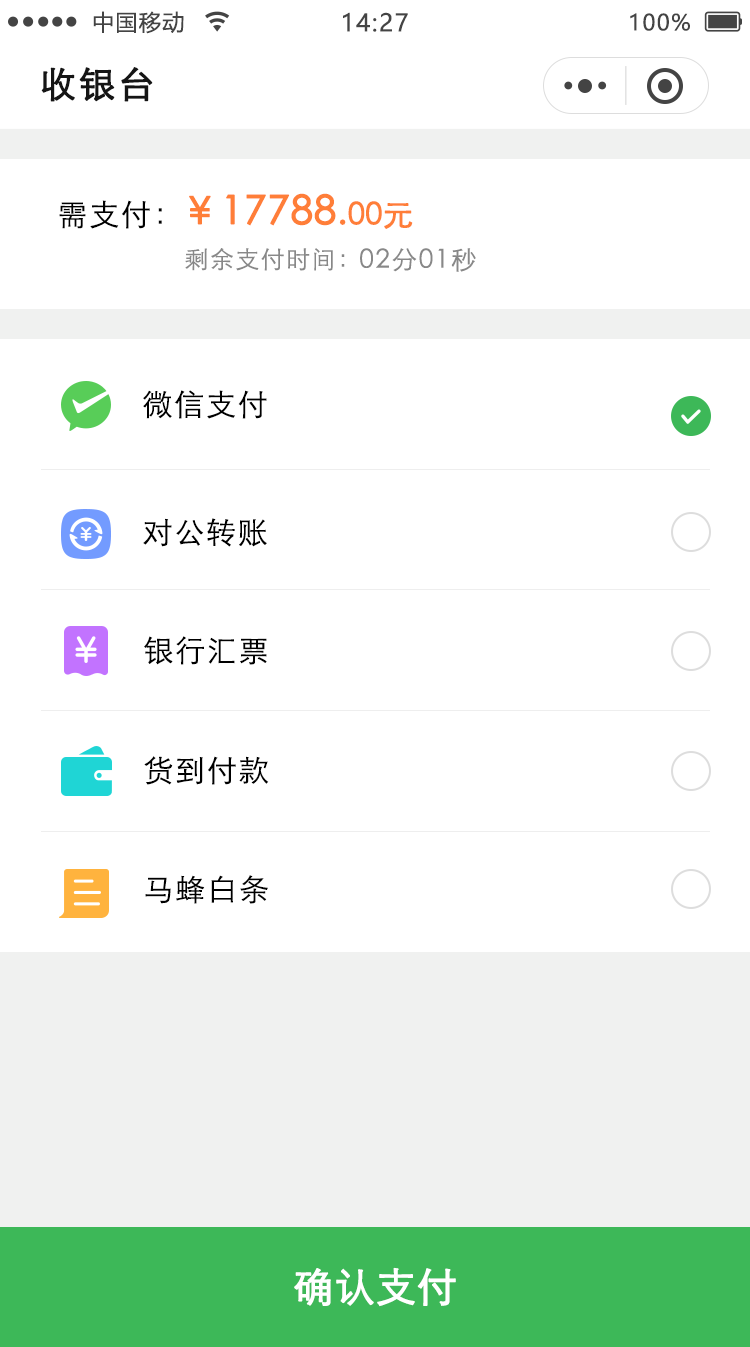
<style>
.page{position:relative;width:750px;height:1347px;background:#ffffff}
.page>*{position:absolute;margin:0}
.t1{font:22px "MicrosoftYaHei";letter-spacing:0.06em;color:#444444}
.t2{font:24px "MicrosoftYaHei";letter-spacing:0.06em;color:#444444}
.t3{font:36px "STXihei";letter-spacing:0.06em;color:#151515;font-weight:bold}
.t4{font:40px "STXihei";color:#ff7e38;font-weight:bold}
.t5{font:36px "STXihei";color:#ff7e38;font-weight:bold}
.t6{font:30px "STXihei";color:#ff7e38;font-weight:bold}
.t7{font:30px "STXihei";letter-spacing:0.06em;color:#000000}
.t8{font:24px "STXihei";letter-spacing:0.06em;color:#888888}
.t9{font:26px "STXihei";letter-spacing:0.06em;color:#888888}
.t10{font:40px "STXihei";color:#ffffff;font-weight:bold}
</style>
<div class="page">
<p class="t1" style="left:93px;top:11px;width:91px;height:23px">中国移动</p>
<p class="t2" style="left:343px;top:12px;width:65px;height:20px">14:27</p>
<p class="t1" style="left:630px;top:13px;width:60px;height:18px">100%</p>
<p class="t3" style="left:41px;top:67px;width:112px;height:35px">收银台</p>
<p class="t4" style="left:189px;top:193px;width:224px;height:36px">￥17788<span class="t5">.</span><span class="t6">00元</span></p>
<p class="t7" style="left:59px;top:200px;width:103px;height:29px">需支付：</p>
<p class="t8" style="left:185px;top:248px;width:160px;height:23px">剩余支付时间：</p>
<p class="t9" style="left:360px;top:248px;width:116px;height:24px">02分01秒</p>
<p class="t7" style="left:143px;top:390px;width:124px;height:29px">微信支付</p>
<p class="t7" style="left:143px;top:518px;width:124px;height:29px">对公转账</p>
<p class="t7" style="left:144px;top:636px;width:123px;height:29px">银行汇票</p>
<p class="t7" style="left:144px;top:756px;width:125px;height:29px">货到付款</p>
<p class="t7" style="left:145px;top:875px;width:123px;height:29px">马蜂白条</p>
<p class="t10" style="left:294px;top:1267px;width:162px;height:40px">确认支付</p>
</div>
